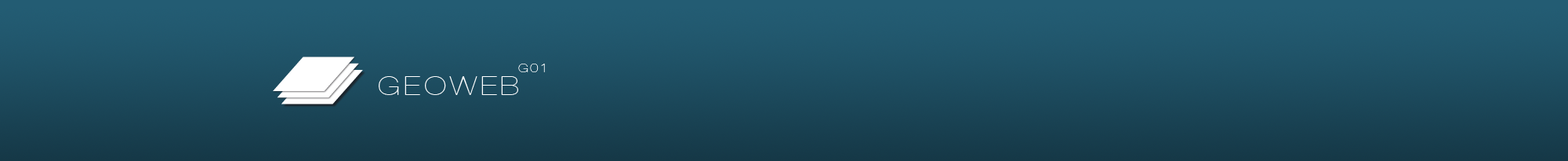
<style>
.page{position:relative;width:1568px;height:161px}
.page>*{position:absolute;margin:0}
.t1{font:11.8px "HelveticaNeueLTPro-UltLt";letter-spacing:0.125em;color:#ffffff;scale:1.2 1}
.t2{font:25.5px "HelveticaNeueLTPro-UltLt";letter-spacing:0.125em;color:#ffffff;scale:1.2 1}
</style>
<div class="page">
<p class="t1" style="left:518px;top:64px;width:27px;height:8px">G01</p>
<p class="t2" style="left:379px;top:76px;width:139px;height:19px">GEOWEB</p>
</div>
